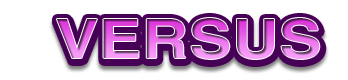
<style>
.page{position:relative;width:348px;height:80px;background:#ffffff}
.page>*{position:absolute;margin:0}
.t1{font:54.4px "HelveticaLTStd-Bold";letter-spacing:0.01em;scale:1.18 1}
</style>
<div class="page">
<p class="t1" style="left:56px;top:18px;width:264px;height:41px">VERSUS</p>
</div>
